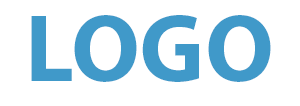
<style>
.page{position:relative;width:300px;height:106px;background:#ffffff}
.page>*{position:absolute;margin:0}
.t1{font:96px "MyriadPro-Bold";color:#4099c9}
</style>
<div class="page">
<p class="t1" style="left:31px;top:15px;width:240px;height:67px">LOGO</p>
</div>
